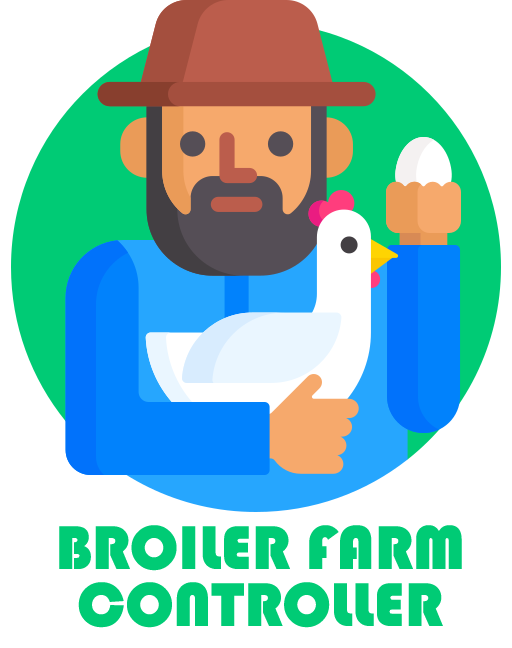
<style>
.page{position:relative;width:512px;height:648px;background:#ffffff}
.page>*{position:absolute;margin:0}
.t1{font:64px "Bauhaus93";color:#00cb75}
</style>
<div class="page">
<p class="t1" style="left:59px;top:525px;width:403px;height:46px">BROILER FARM</p>
<p class="t1" style="left:78px;top:582px;width:365px;height:46px">CONTROLLER</p>
</div>
